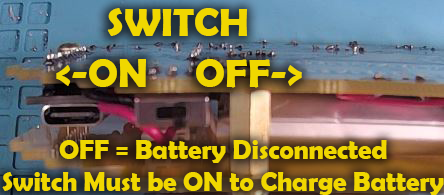
<style>
.page{position:relative;width:444px;height:195px}
.page>*{position:absolute;margin:0}
.t1{font:40px "BerlinSansFBDemi-Bold";color:#f0d700}
.t2{font:26.7px "BerlinSansFBDemi-Bold";color:#f0d700}
</style>
<div class="page">
<p class="t1" style="left:107px;top:8px;width:140px;height:28px">SWITCH</p>
<p class="t1" style="left:56px;top:59px;width:90px;height:28px">&lt;-ON</p>
<p class="t1" style="left:196px;top:59px;width:106px;height:29px">OFF-&gt;</p>
<p class="t2" style="left:2px;top:140px;width:442px;height:55px;text-align:center">OFF = Battery Disconnected<br>Switch Must be ON to Charge Battery</p>
</div>
